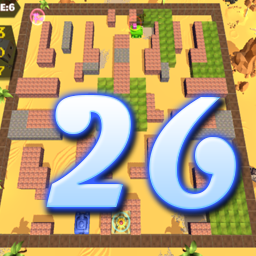
<style>
.page{position:relative;width:256px;height:256px}
.page>*{position:absolute;margin:0}
.t1{font:160.5px "Magneto-Bold";letter-spacing:0.02em;scale:0.85 1}
</style>
<div class="page">
<p class="t1" style="left:46px;top:95px;width:190px;height:114px">26</p>
</div>
